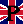
<style>
.page{position:relative;width:23px;height:24px;background:#cf142b}
.page>*{position:absolute;margin:0}
.t1{font:24px "BellMTBold";color:#000000}
</style>
<div class="page">
<p class="t1" style="left:5px;top:5px;width:15px;height:16px">P</p>
</div>
